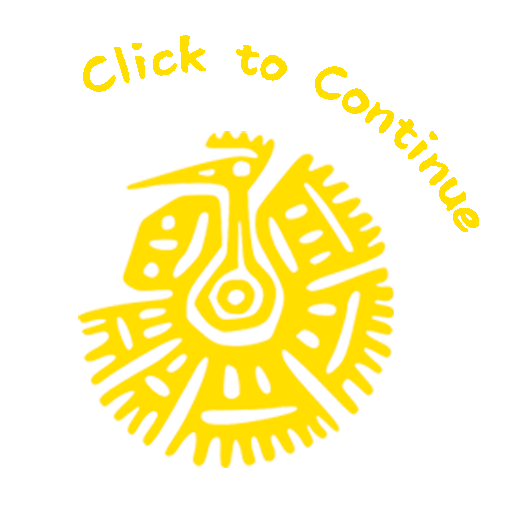
<style>
.page{position:relative;width:512px;height:512px;background:#ffffff}
.page>*{position:absolute;margin:0}
.t1{font:46.3px "RiiTegakiFude";color:#ffde00}
</style>
<div class="page">
<p class="t1" style="left:83px;top:35px;width:396px;height:197px;rotate:20deg">Click to Continue</p>
</div>
